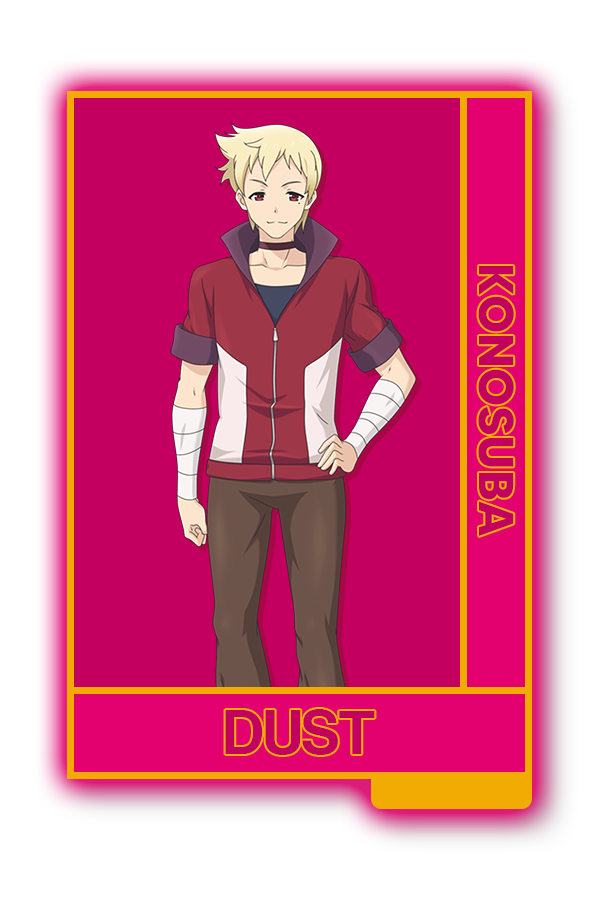
<style>
.page{position:relative;width:600px;height:900px;background:#c3005f}
.page>*{position:absolute;margin:0}
.t1{font:48.8px "MADETOMMY-Bold";color:#c3005f}
.t2{font:65.2px "CoolveticaRg-Regular";color:#c3005f}
</style>
<div class="page">
<p class="t1" style="left:478px;top:266px;width:36px;height:270px;rotate:90deg">KONOSUBA</p>
<p class="t2" style="left:225px;top:709px;width:150px;height:46px">DUST</p>
</div>
